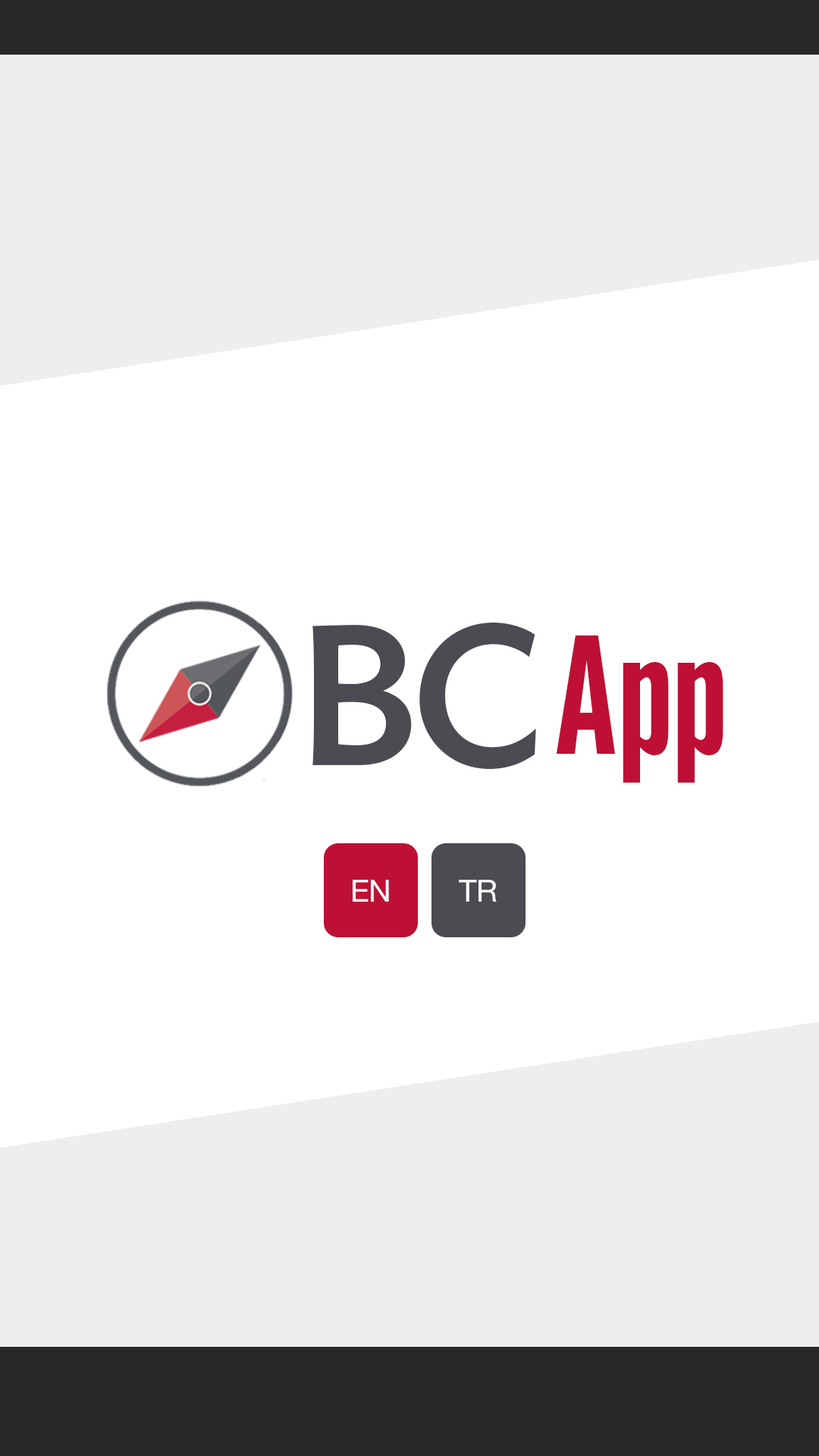
<style>
.page{position:relative;width:819px;height:1456px;background:#ffffff}
.page>*{position:absolute;margin:0}
.t1{font:198px "IdealSans-Medium";letter-spacing:-0.05em;color:#4b4c51}
.t2{font:164.2px "CgGothicNo1";color:#be1035}
.t3{font:30.6px "HelveticaNeue";letter-spacing:-0.02em;color:#ffffff}
</style>
<div class="page">
<p class="t1" style="left:312px;top:623px;width:224px;height:147px">BC</p>
<p class="t2" style="left:556px;top:635px;width:167px;height:148px">App</p>
<p class="t3" style="left:353px;top:880px;width:36px;height:22px">EN</p>
<p class="t3" style="left:459px;top:880px;width:38px;height:22px">TR</p>
</div>
